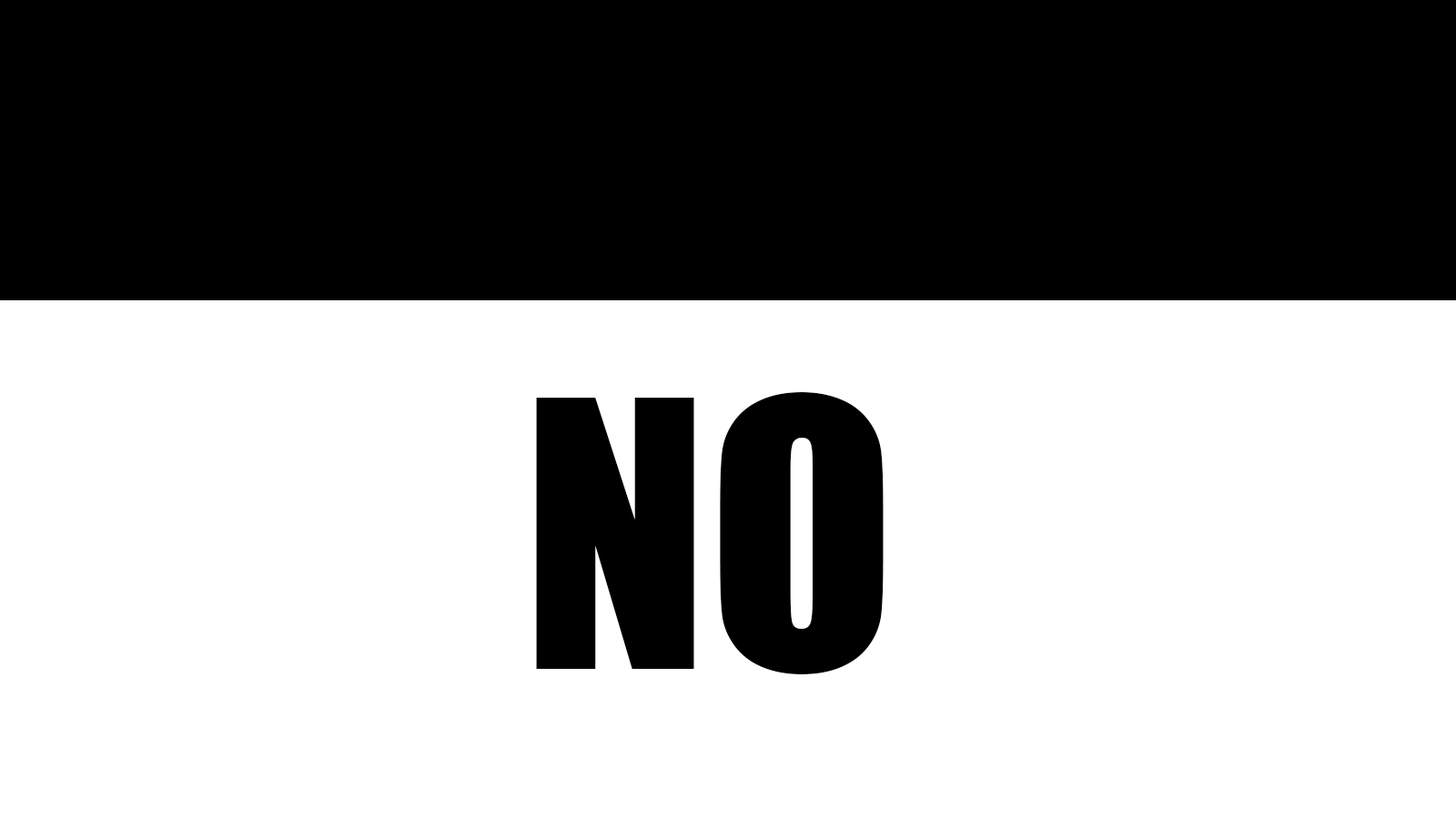
<style>
.page{position:relative;width:1456px;height:819px;background:#ffffff}
.page>*{position:absolute;margin:0}
.t1{font:343.2px "Impact";color:#000000}
</style>
<div class="page">
<p class="t1" style="left:536px;top:392px;width:348px;height:282px">NO</p>
</div>
